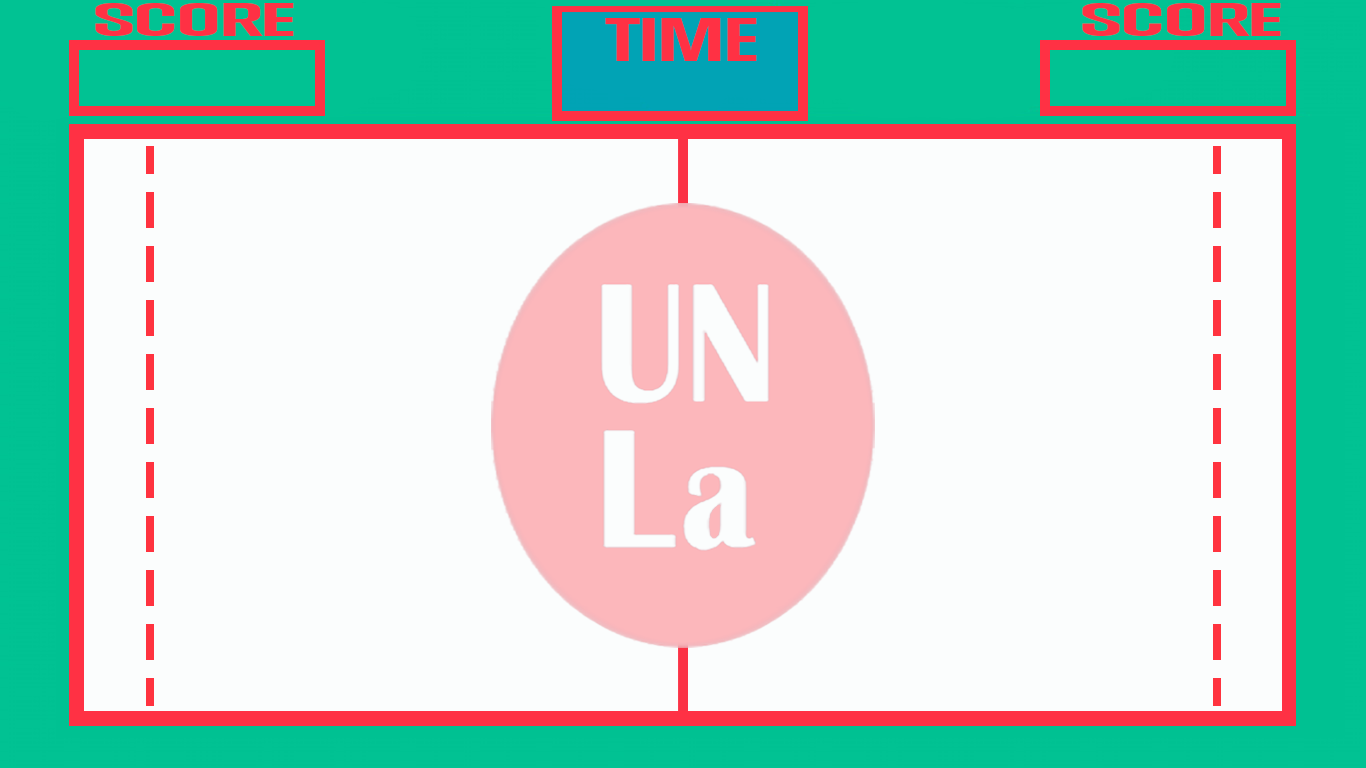
<style>
.page{position:relative;width:1366px;height:768px;background:#fbfdfd}
.page>*{position:absolute;margin:0}
.t1{font:42.9px "TrumpGothicEast-Bold";letter-spacing:-0.02em;color:#ff3144;scale:2.74 1}
.t2{font:56.1px "TrumpGothicEast-Bold";letter-spacing:-0.02em;color:#ff3144;scale:2.09 1}
</style>
<div class="page">
<p class="t1" style="left:95px;top:3px;width:199px;height:33px">SCORE</p>
<p class="t1" style="left:1082px;top:3px;width:199px;height:33px">SCORE</p>
<p class="t2" style="left:605px;top:18px;width:152px;height:43px">TIME</p>
</div>
